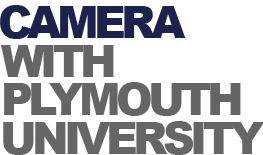
<style>
.page{position:relative;width:263px;height:155px;background:#ffffff}
.page>*{position:absolute;margin:0}
.t1{font:43.7px "Arial-Black";letter-spacing:-0.1em;color:#1c224c}
.t2{font:43.7px "Arial-Black";letter-spacing:-0.1em;color:#656565}
.t3{font:43.7px "Arial-Black";letter-spacing:-0.1em;color:#666666}
</style>
<div class="page">
<p class="t1" style="left:0px;top:5px;width:186px;height:34px">CAMERA</p>
<p class="t2" style="left:1px;top:45px;width:113px;height:32px">WITH</p>
<p class="t2" style="left:4px;top:82px;width:237px;height:34px">PLYMOUTH</p>
<p class="t3" style="left:3px;top:121px;width:261px;height:34px">UNIVERSITY</p>
</div>
